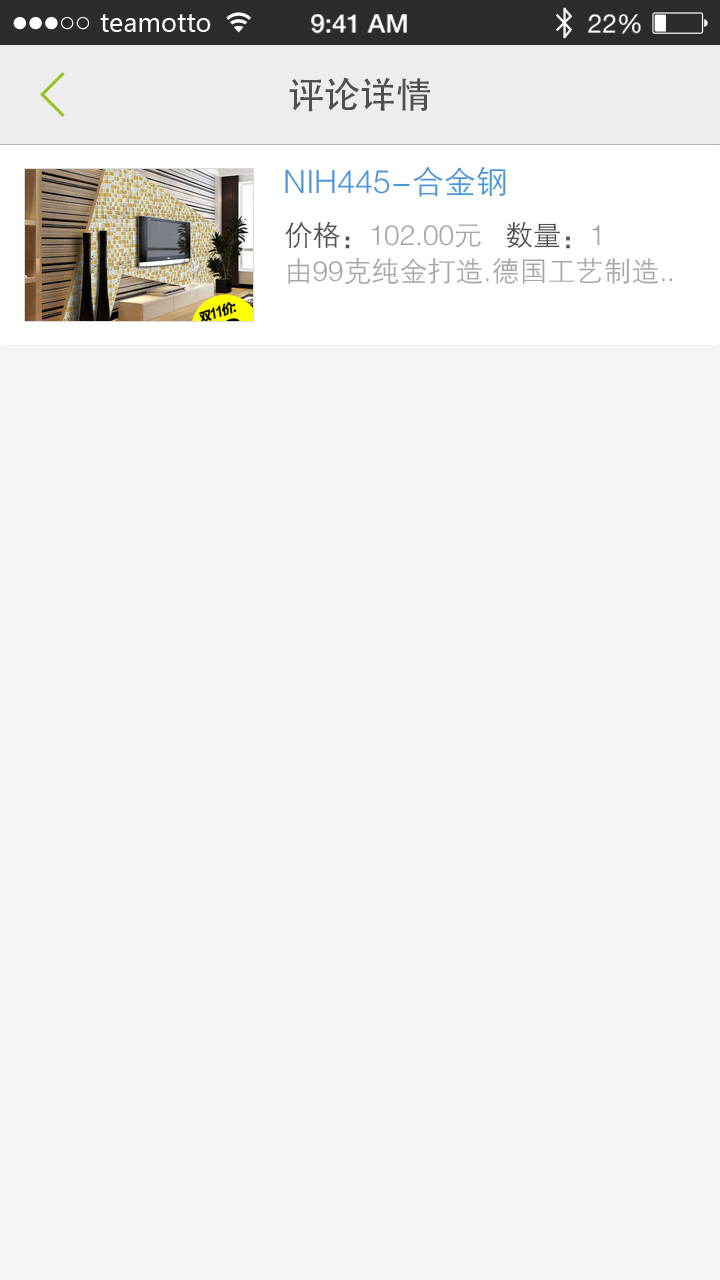
<style>
.page{position:relative;width:720px;height:1280px;background:#f5f5f5}
.page>*{position:absolute;margin:0}
.t1{font:36px "AdobeHeitiStd-Regular";color:#505050}
.t2{font:32px "FZZDXJW--GB1-0";color:#4997d9}
.t3{font:28px "FZZDXJW--GB1-0";color:#a6a6a6}
.t4{font:28px/36px "FZZDXJW--GB1-0";color:#505050}
.t5{font:28px/36px "FZZDXJW--GB1-0";color:#a6a6a6}
</style>
<div class="page">
<p class="t1" style="left:289px;top:77px;width:141px;height:35px">评论详情</p>
<p class="t2" style="left:285px;top:166px;width:221px;height:31px">NIH445-合金钢</p>
<p class="t3" style="left:285px;top:221px;width:388px;height:64px"><span class="t4">价格：</span><span class="t5">102.00元   </span><span class="t4">数量：</span><span class="t5">1<br></span>由99克纯金打造.德国工艺制造..</p>
</div>
